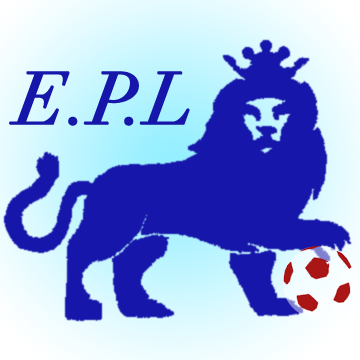
<style>
.page{position:relative;width:360px;height:360px;background:#1616aa}
.page>*{position:absolute;margin:0}
.t1{font:72px "Didot-Italic";color:#1616aa;font-weight:bold}
</style>
<div class="page">
<p class="t1" style="left:9px;top:71px;width:181px;height:55px">E.P.L.</p>
</div>
